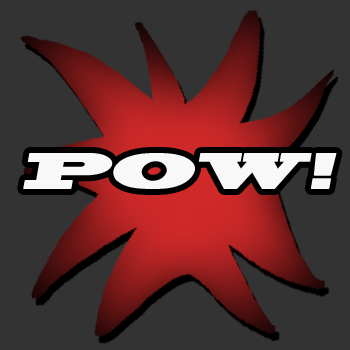
<style>
.page{position:relative;width:350px;height:350px;background:#333333}
.page>*{position:absolute;margin:0}
.t1{font:48px "BlackoakStd";letter-spacing:-0.025em;color:#f8f8f8;font-style:italic}
</style>
<div class="page">
<p class="t1" style="left:23px;top:153px;width:314px;height:36px">POW!</p>
</div>
